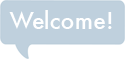
<style>
.page{position:relative;width:125px;height:59px;background:#bfd0dd}
.page>*{position:absolute;margin:0}
.t1{font:23.3px "Futura-Medium";color:#ffffff}
.t2{font:23.3px "Futura-Medium";letter-spacing:-0.05em;color:#ffffff}
</style>
<div class="page">
<p class="t1" style="left:9px;top:10px;width:103px;height:19px"><span class="t2">We</span>lcome!</p>
</div>
